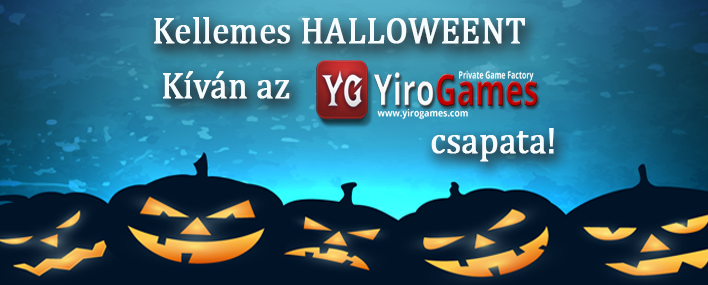
<style>
.page{position:relative;width:708px;height:285px}
.page>*{position:absolute;margin:0}
.t1{font:36.8px "Cambria";color:#f6fbfd;font-weight:bold;scale:0.92 1}
</style>
<div class="page">
<p class="t1" style="left:154px;top:17px;width:400px;height:145px">Kellemes HALLOWEENT<br> Kíván az<br>          csapata!</p>
</div>
